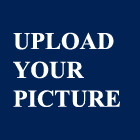
<style>
.page{position:relative;width:140px;height:140px;background:#002254}
.page>*{position:absolute;margin:0}
.t1{font:24px "TimesNewRomanPS-BoldMT";color:#ffffff}
</style>
<div class="page">
<p class="t1" style="left:13px;top:32px;width:107px;height:75px">UPLOAD<br>YOUR<br>PICTURE</p>
</div>
